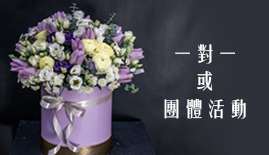
<style>
.page{position:relative;width:269px;height:155px}
.page>*{position:absolute;margin:0}
.t1{font:19.9px/27.7px "FZYTK--GBK1-0";color:#ffffff;scale:1.13 1}
</style>
<div class="page">
<p class="t1" style="left:164px;top:44px;width:82px;height:75px;text-align:center">一對一<br>或<br>團體活動</p>
</div>
